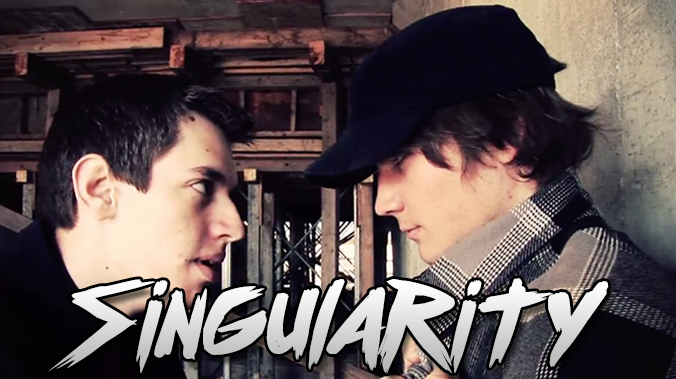
<style>
.page{position:relative;width:676px;height:379px}
.page>*{position:absolute;margin:0}
.t1{font:90px "outrunfuture"}
</style>
<div class="page">
<p class="t1" style="left:48px;top:278px;width:561px;height:96px">Singularity</p>
</div>
